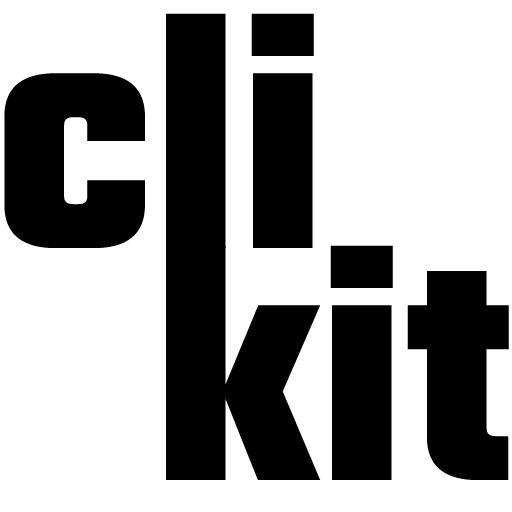
<style>
.page{position:relative;width:512px;height:512px;background:#ffffff}
.page>*{position:absolute;margin:0}
.t1{font:350px "Teko-Bold";color:#000000}
</style>
<div class="page">
<p class="t1" style="left:4px;top:13px;width:310px;height:235px">cli</p>
<p class="t1" style="left:166px;top:245px;width:343px;height:235px">kit</p>
</div>
